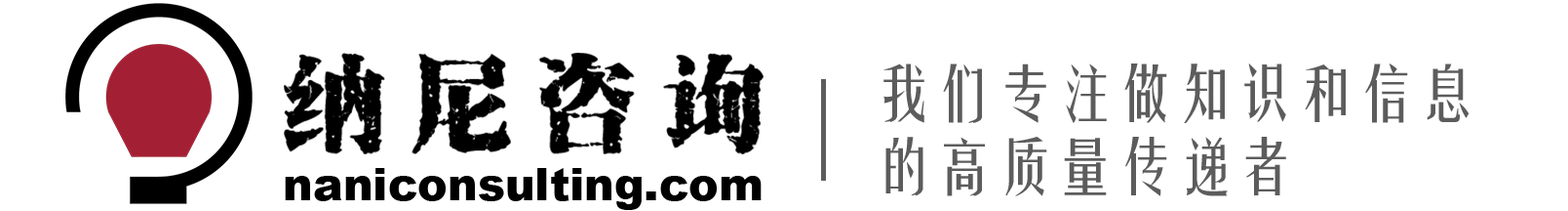
<style>
.page{position:relative;width:1568px;height:211px;background:#ffffff}
.page>*{position:absolute;margin:0}
.t1{font:60.9px/73.1px "CloudYaoTiGBK";letter-spacing:-0.01em;color:#5c5c5c}
.t2{font:44.8px "Arial-Black";color:#000000}
</style>
<div class="page">
<p class="t1" style="left:883px;top:63px;width:587px;height:133px">我们专注做知识和信息<br>的高质量传递者</p>
<p class="t2" style="left:285px;top:168px;width:477px;height:42px">naniconsulting.com</p>
</div>
